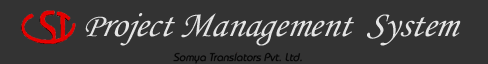
<style>
.page{position:relative;width:488px;height:64px;background:#333333}
.page>*{position:absolute;margin:0}
.t1{font:37px "MonotypeCorsiva";color:#e4e4e4;font-style:italic}
.t2{font:33px "MonotypeCorsiva";color:#e4e4e4;font-style:italic}
</style>
<div class="page">
<p class="t1" style="left:85px;top:13px;width:376px;height:33px"><span class="t2">P</span>roject Management  System</p>
</div>
